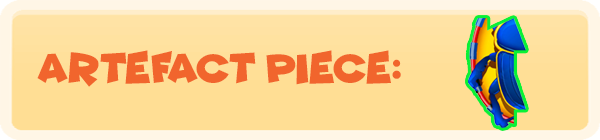
<style>
.page{position:relative;width:600px;height:140px;background:#ffde94}
.page>*{position:absolute;margin:0}
.t1{font:42.2px "Funhouse";color:#f1652d}
</style>
<div class="page">
<p class="t1" style="left:37px;top:50px;width:364px;height:37px">Artefact piece:</p>
</div>
